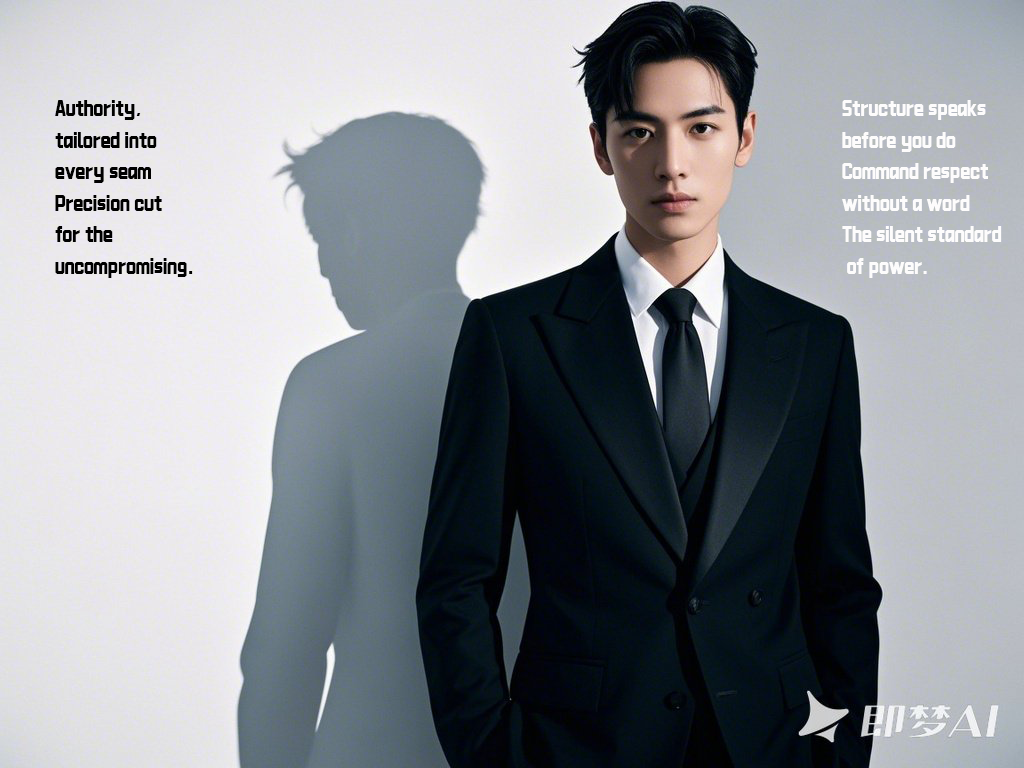
<style>
.page{position:relative;width:1024px;height:768px}
.page>*{position:absolute;margin:0}
.t1{font:18px "CKTKingKong";color:#000000}
.t2{font:18px "CKTKingKong";color:#fdfcfc}
</style>
<div class="page">
<p class="t1" style="left:55px;top:100px;width:138px;height:178px">Authority, <br>tailored into <br>every seam<br>Precision cut <br>for the <br>uncompromising.</p>
<p class="t2" style="left:842px;top:100px;width:160px;height:178px">Structure speaks <br>before you do<br>Command respect <br>without a word<br>The silent standard<br> of power.</p>
</div>
